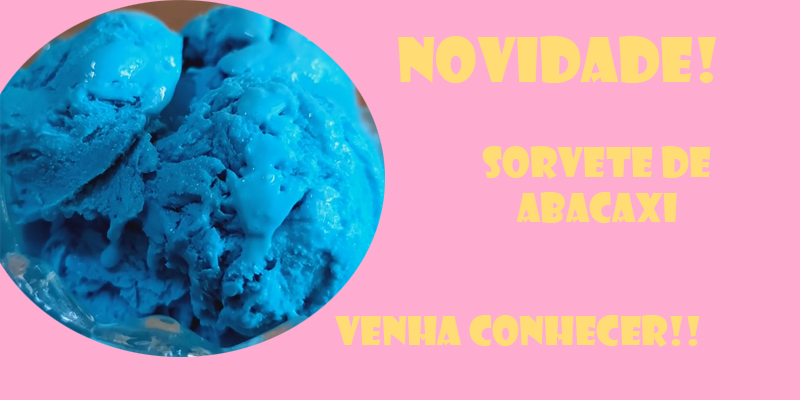
<style>
.page{position:relative;width:800px;height:400px;background:#feadd0}
.page>*{position:absolute;margin:0}
.t1{font:60px "ShowcardGothic-Reg";color:#ffdd74}
.t2{font:40px "ShowcardGothic-Reg";color:#ffdd74}
.t3{font:38px "ShowcardGothic-Reg";color:#ffdd74}
.t4{font:39px "ShowcardGothic-Reg";color:#ffdd74}
</style>
<div class="page">
<p class="t1" style="left:398px;top:36px;width:319px;height:47px">NOVIDADE!</p>
<p class="t2" style="left:482px;top:146px;width:229px;height:33px">sORVETE DE</p>
<p class="t3" style="left:516px;top:192px;width:161px;height:31px">aBACAXI</p>
<p class="t4" style="left:335px;top:315px;width:365px;height:32px">VENHA CONHECER!!</p>
</div>
